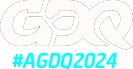
<style>
.page{position:relative;width:133px;height:69px;background:#ffffff}
.page>*{position:absolute;margin:0}
.t1{font:24px "Neuron-Bold";color:#00ffff;font-style:italic}
</style>
<div class="page">
<p class="t1" style="left:12px;top:53px;width:105px;height:18px">#AGDQ2024</p>
</div>
